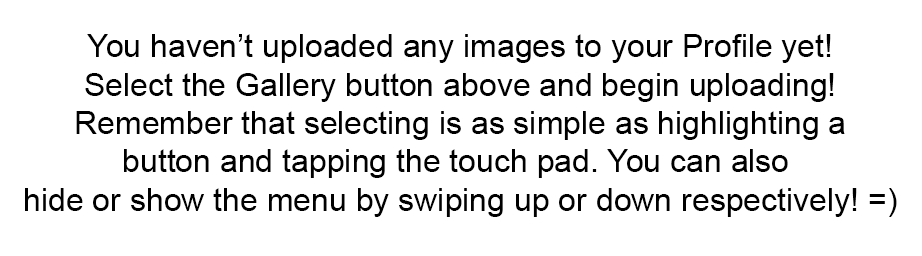
<style>
.page{position:relative;width:922px;height:256px;background:#ffffff}
.page>*{position:absolute;margin:0}
.t1{font:32px "ArialMT";color:#000000}
</style>
<div class="page">
<p class="t1" style="left:25px;top:34px;width:872px;height:183px;text-align:center">You haven’t uploaded any images to your Profile yet!<br>Select the Gallery button above and begin uploading!<br>Remember that selecting is as simple as highlighting a<br>button and tapping the touch pad. You can also <br>hide or show the menu by swiping up or down respectively! =)</p>
</div>
